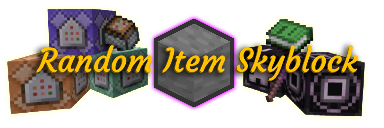
<style>
.page{position:relative;width:384px;height:128px;background:#ffffff}
.page>*{position:absolute;margin:0}
.t1{font:32px "Courgette-Regular";color:#ffc200}
</style>
<div class="page">
<p class="t1" style="left:35px;top:46px;width:323px;height:36px">Random Item Skyblock</p>
<p class="t1" style="left:36px;top:45px;width:323px;height:36px">Random Item Skyblock</p>
</div>
